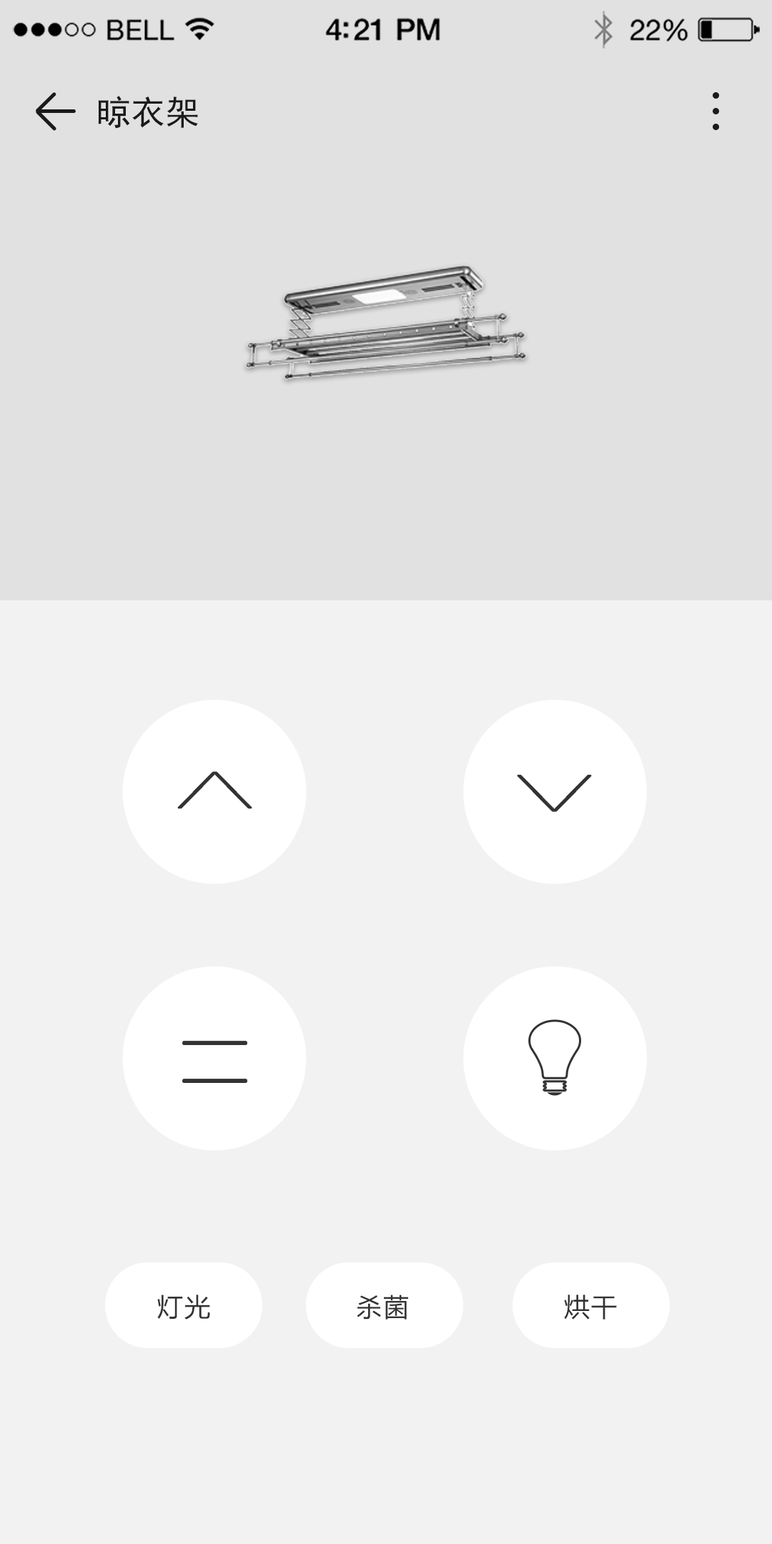
<style>
.page{position:relative;width:772px;height:1544px;background:#f2f2f2}
.page>*{position:absolute;margin:0}
.t1{font:34.3px "SimHei";color:#1a1a1a}
.t2{font:139.8px "HelveticaNeueLTPro-UltLt";letter-spacing:0.05em;color:#333333;scale:0.5 1}
.t3{font:62.2px "HelveticaNeueLTPro-UltLt";letter-spacing:0.05em;color:#333333}
.t4{font:25.7px "MicrosoftYaHei";letter-spacing:0.055em;color:#333333}
</style>
<div class="page">
<p class="t1" style="left:98px;top:96px;width:100px;height:33px">晾衣架</p>
<p class="t2" style="left:178px;top:772px;width:74px;height:37px;rotate:90deg">&lt;</p>
<p class="t2" style="left:518px;top:775px;width:73px;height:36px;rotate:-90deg">&lt;</p>
<p class="t3" style="left:184px;top:1042px;width:62px;height:40px;rotate:-90deg">| |</p>
<p class="t4" style="left:157px;top:1295px;width:460px;height:25px">灯光                杀菌                 烘干</p>
</div>
